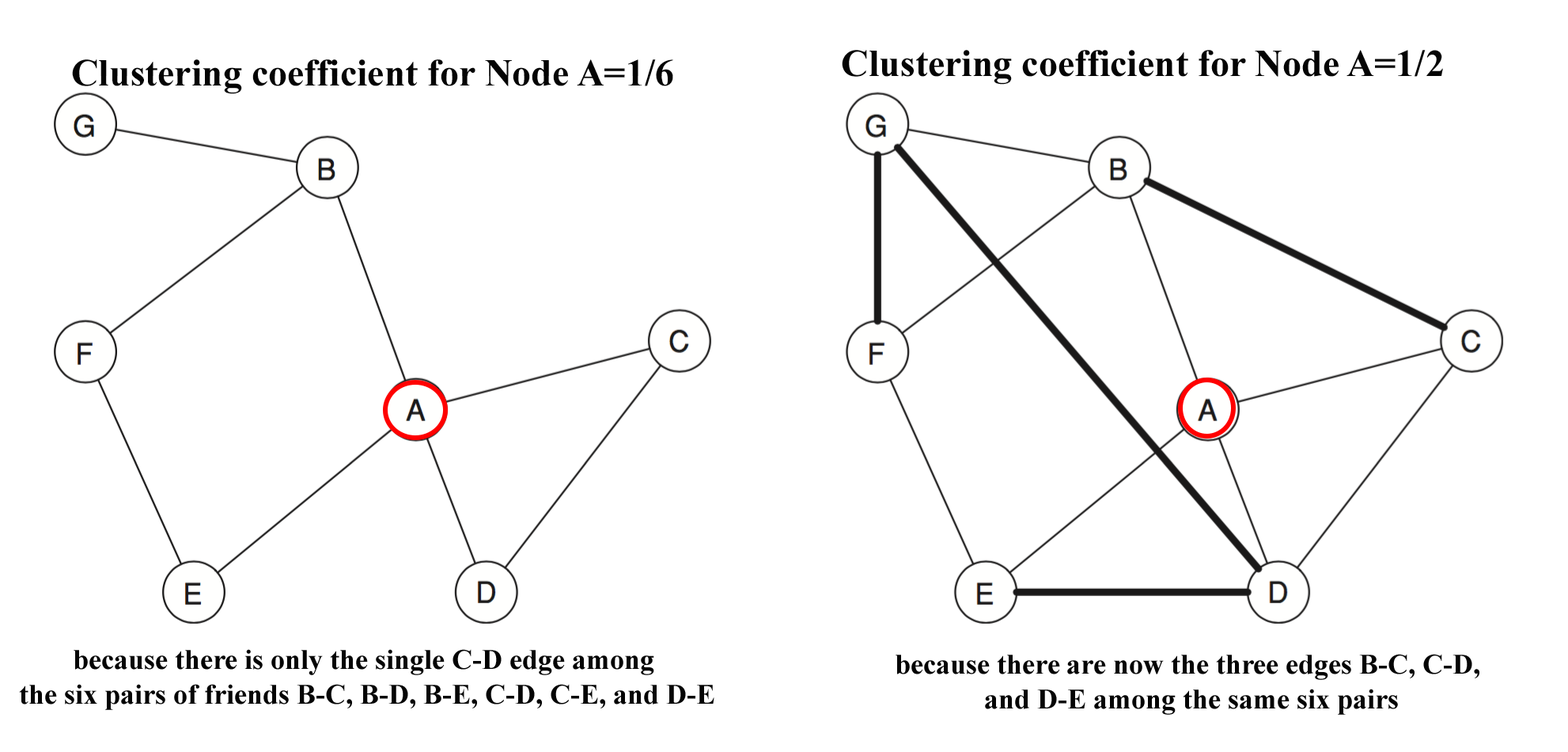
<style>
.page{position:relative;width:1568px;height:752px;background:#ffffff}
.page>*{position:absolute;margin:0}
.t1{font:38px "TimesNewRomanPS-BoldMT";color:#040404}
.t2{font:28.5px "TimesNewRomanPS-BoldMT";color:#040404}
</style>
<div class="page">
<p class="t1" style="left:842px;top:50px;width:601px;height:35px">Clustering coefficient for Node A=1/2</p>
<p class="t1" style="left:72px;top:59px;width:601px;height:35px">Clustering coefficient for Node A=1/6</p>
<p class="t2" style="left:19px;top:649px;width:695px;height:61px;text-align:center">because there is only the single C-D edge among <br>the six pairs of friends B-C, B-D, B-E, C-D, C-E, and D-E</p>
<p class="t2" style="left:896px;top:653px;width:583px;height:61px;text-align:center">because there are now the three edges B-C, C-D, <br>and D-E among the same six pairs</p>
</div>
